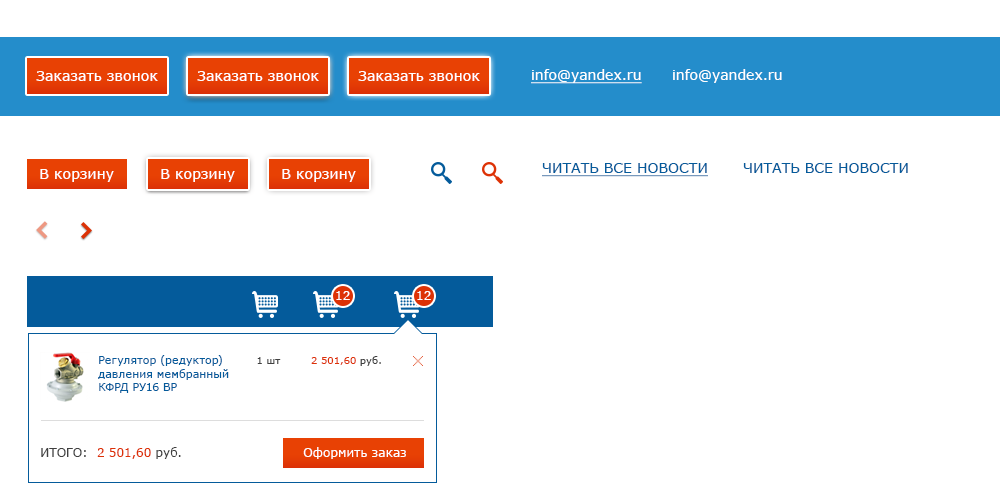
<style>
.page{position:relative;width:1000px;height:500px;background:#ffffff}
.page>*{position:absolute;margin:0}
.t1{font:14px "Verdana";letter-spacing:0.012em;color:#ffffff}
.t2{font:14px "Verdana";color:#ffffff;text-decoration:underline}
.t3{font:14px "Verdana";color:#ffffff}
.t4{font:14px "Verdana";color:#045b9b;text-transform:uppercase;text-decoration:underline}
.t5{font:14px "Verdana";color:#045b9b;text-transform:uppercase}
.t6{font:12px "Verdana";letter-spacing:0.012em;color:#ffffff}
.t7{font:11px "Verdana";color:#045b9b}
.t8{font:10px "Verdana";color:#404040}
.t9{font:10px "Verdana";color:#dd3206}
.t10{font:12px "Verdana";color:#404040}
.t11{font:12px "Verdana";color:#dd3206}
</style>
<div class="page">
<p class="t1" style="left:36px;top:71px;width:122px;height:10px">Заказать звонок</p>
<p class="t1" style="left:197px;top:71px;width:122px;height:10px">Заказать звонок</p>
<p class="t1" style="left:358px;top:71px;width:122px;height:10px">Заказать звонок</p>
<p class="t2" style="left:531px;top:69px;width:111px;height:15px">info@yandex.ru</p>
<p class="t3" style="left:673px;top:69px;width:109px;height:14px">info@yandex.ru</p>
<p class="t1" style="left:40px;top:169px;width:74px;height:13px">В корзину</p>
<p class="t1" style="left:161px;top:169px;width:74px;height:13px">В корзину</p>
<p class="t1" style="left:282px;top:169px;width:74px;height:13px">В корзину</p>
<p class="t4" style="left:542px;top:163px;width:166px;height:14px">Читать все новости</p>
<p class="t5" style="left:743px;top:163px;width:165px;height:10px">Читать все новости</p>
<p class="t6" style="left:336px;top:291px;width:14px;height:9px">12</p>
<p class="t6" style="left:417px;top:291px;width:14px;height:9px">12</p>
<p class="t7" style="left:98px;top:355px;width:131px;height:38px">Регулятор (редуктор)<br>давления мембранный<br>КФРД РУ16 ВР</p>
<p class="t8" style="left:257px;top:357px;width:24px;height:7px">1 шт</p>
<p class="t9" style="left:311px;top:356px;width:70px;height:10px">2 501,60 <span class="t8">руб.</span></p>
<p class="t10" style="left:41px;top:448px;width:45px;height:9px">ИТОГО:</p>
<p class="t11" style="left:97px;top:447px;width:84px;height:12px">2 501,60 <span class="t10">руб.</span></p>
<p class="t6" style="left:303px;top:447px;width:103px;height:12px">Оформить заказ</p>
</div>
